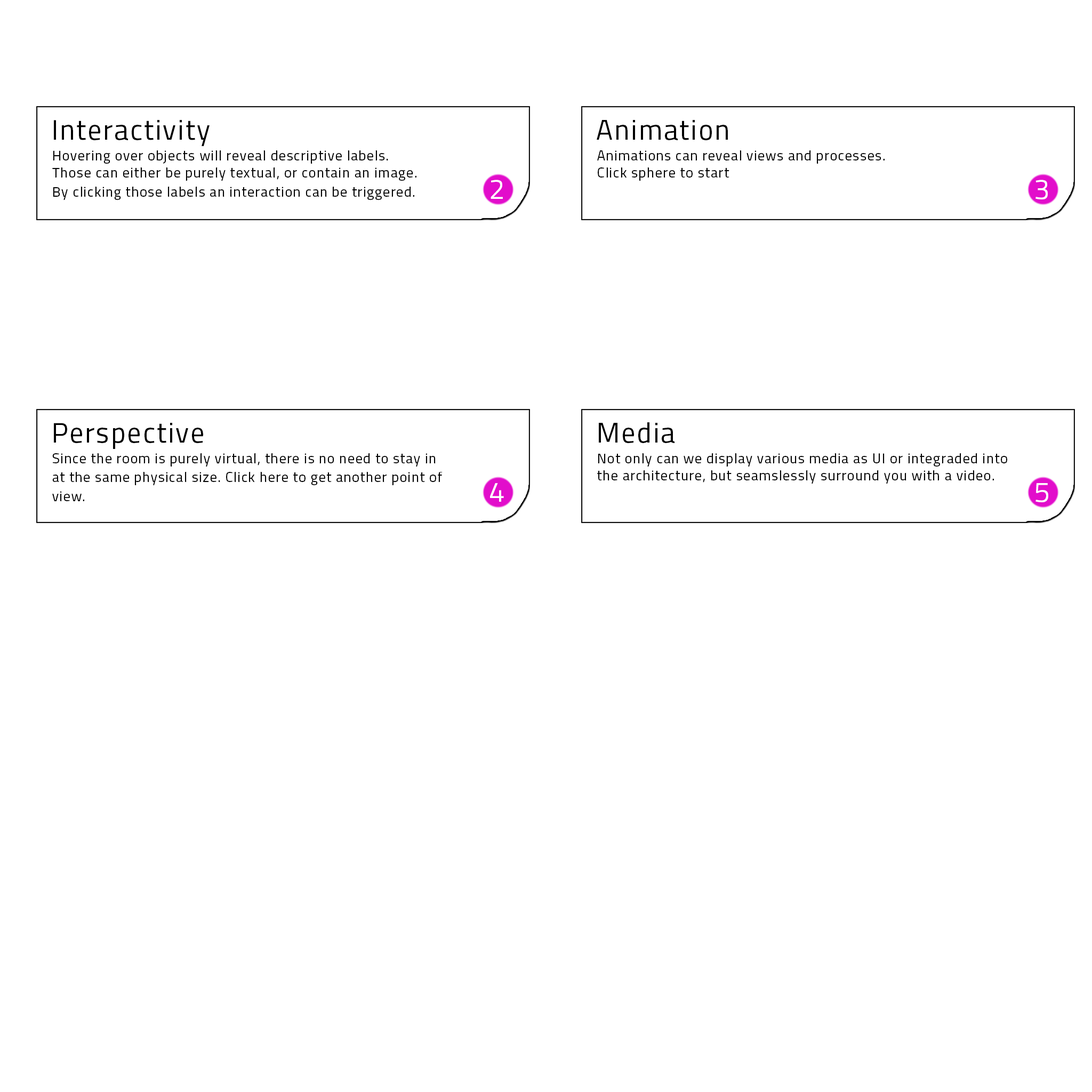
<style>
.page{position:relative;width:1092px;height:1092px;background:#ffffff}
.page>*{position:absolute;margin:0}
.t1{font:28.3px "Titillium-Regular";letter-spacing:0.05em;color:#010101}
.t2{font:14.2px "Titillium-Regular";letter-spacing:0.05em;color:#000000}
.t3{font:28.3px "Titillium-Regular";letter-spacing:0.05em;color:#ffffff}
.t4{font:14.2px/18.9px "Titillium-Regular";letter-spacing:0.05em;color:#000000}
.t5{font:14.2px/17.3px "Titillium-Regular";letter-spacing:0.05em;color:#000000}
</style>
<div class="page">
<p class="t1" style="left:54px;top:120px;width:156px;height:26px">Interactivity</p>
<p class="t1" style="left:597px;top:120px;width:131px;height:20px">Animation</p>
<p class="t2" style="left:53px;top:150px;width:335px;height:14px">Hovering over objects will reveal descriptive labels.</p>
<p class="t2" style="left:597px;top:150px;width:288px;height:14px">Animations can reveal views and processes.</p>
<p class="t2" style="left:52px;top:167px;width:364px;height:14px">Those can either be purely textual, or contain an image.</p>
<p class="t2" style="left:598px;top:167px;width:131px;height:14px">Click sphere to start</p>
<p class="t3" style="left:491px;top:180px;width:12px;height:19px">2</p>
<p class="t3" style="left:1035px;top:180px;width:13px;height:19px">3</p>
<p class="t2" style="left:53px;top:187px;width:361px;height:13px">By clicking those labels an interaction can be triggered.</p>
<p class="t1" style="left:54px;top:423px;width:149px;height:26px">Perspective</p>
<p class="t1" style="left:599px;top:422px;width:75px;height:21px">Media</p>
<p class="t4" style="left:52px;top:453px;width:391px;height:48px">Since the room is purely virtual, there is no need to stay in at the same physical size. Click here to get another point of view.</p>
<p class="t5" style="left:597px;top:453px;width:410px;height:31px">Not only can we display various media as UI or integraded into the architecture, but seamslessly surround you with a video.</p>
<p class="t3" style="left:490px;top:483px;width:14px;height:19px">4</p>
<p class="t3" style="left:1035px;top:483px;width:13px;height:19px">5</p>
</div>
